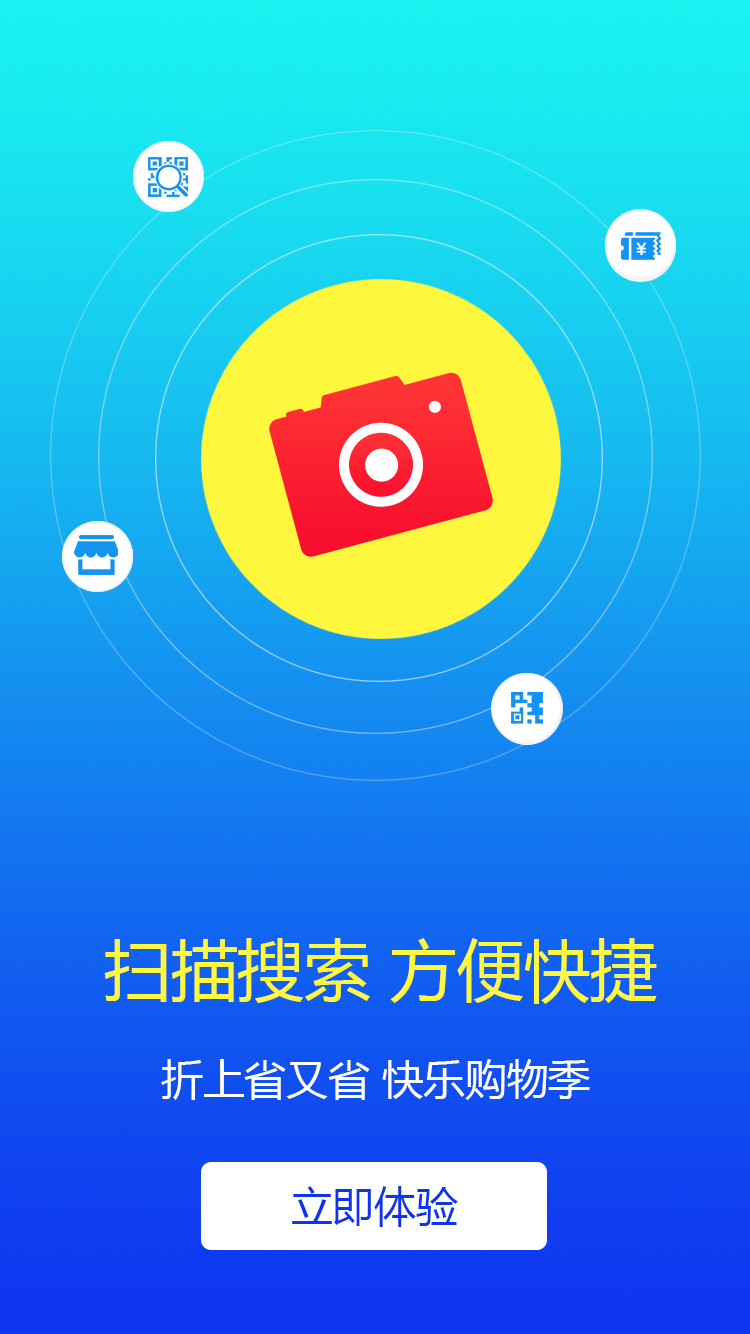
<style>
.page{position:relative;width:750px;height:1334px}
.page>*{position:absolute;margin:0}
.t1{font:66.7px "MicrosoftYaHei";color:#fef73d}
.t2{font:41.7px "MicrosoftYaHei";color:#ffffff}
.t3{font:41.7px "MicrosoftYaHei";color:#0f34f0}
</style>
<div class="page">
<p class="t1" style="left:104px;top:938px;width:553px;height:66px">扫描搜索 方便快捷</p>
<p class="t2" style="left:161px;top:1059px;width:429px;height:41px">折上省又省 快乐购物季</p>
<p class="t3" style="left:292px;top:1186px;width:166px;height:41px">立即体验</p>
</div>
